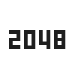
<style>
.page{position:relative;width:74px;height:74px;background:#ffffff}
.page>*{position:absolute;margin:0}
.t1{font:30px "04b24";color:#1f1f1f}
</style>
<div class="page">
<p class="t1" style="left:9px;top:30px;width:57px;height:19px">2048</p>
</div>
